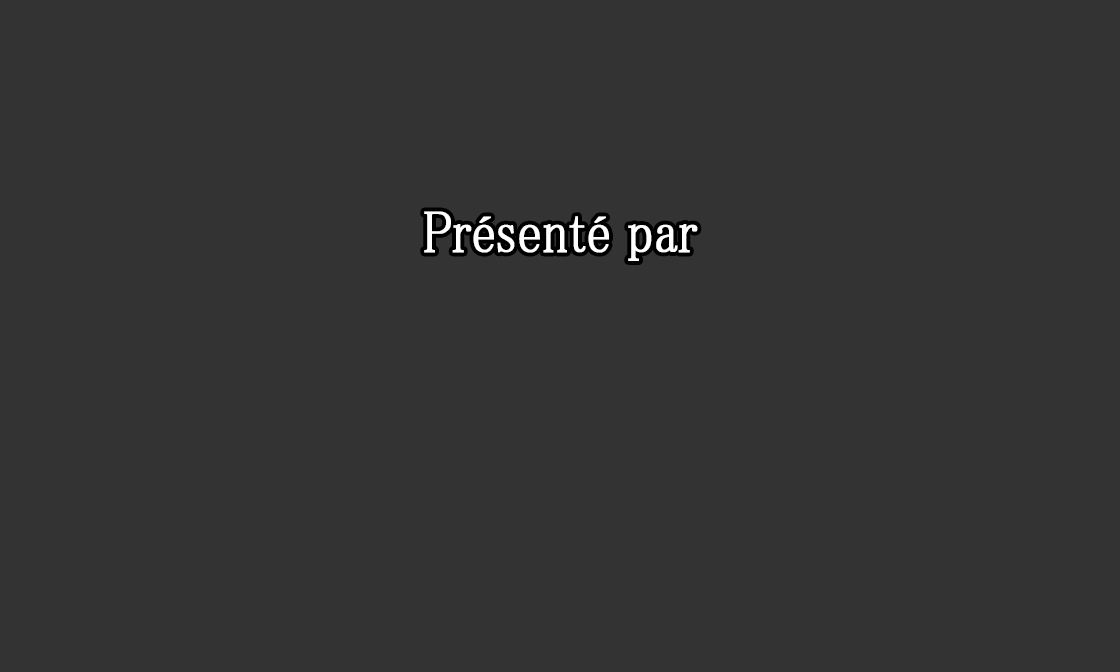
<style>
.page{position:relative;width:1120px;height:672px;background:#333333}
.page>*{position:absolute;margin:0}
.t1{font:59.5px "MS-PMincho";color:#ffffff;font-weight:bold;scale:0.84 1}
</style>
<div class="page">
<p class="t1" style="left:424px;top:211px;width:274px;height:50px">Présenté par</p>
</div>
